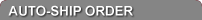
<style>
.page{position:relative;width:202px;height:20px;background:#858585}
.page>*{position:absolute;margin:0}
.t1{font:13.3px "Arial-BoldMT";color:#ffffff}
</style>
<div class="page">
<p class="t1" style="left:8px;top:5px;width:125px;height:11px">AUTO-SHIP ORDER</p>
</div>
